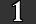
<style>
.page{position:relative;width:36px;height:24px;background:#333333}
.page>*{position:absolute;margin:0}
.t1{font:34px "Perpetua-Bold";color:#ffffff}
</style>
<div class="page">
<p class="t1" style="left:12px;top:1px;width:10px;height:20px">1</p>
</div>
